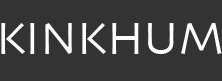
<style>
.page{position:relative;width:222px;height:81px;background:#333333}
.page>*{position:absolute;margin:0}
.t1{font:47px "Skia-Regular";color:#fdfcfc}
</style>
<div class="page">
<p class="t1" style="left:1px;top:23px;width:221px;height:31px">KINKHUM</p>
</div>
